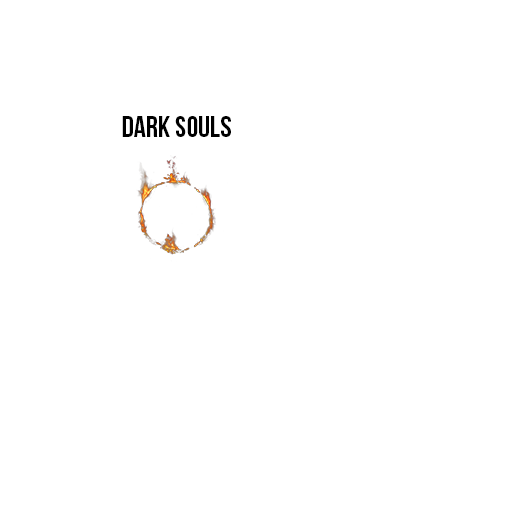
<style>
.page{position:relative;width:512px;height:512px;background:#ffffff}
.page>*{position:absolute;margin:0}
.t1{font:30px "BebasNeue";color:#000000}
</style>
<div class="page">
<p class="t1" style="left:122px;top:116px;width:109px;height:21px">dark souls</p>
</div>
